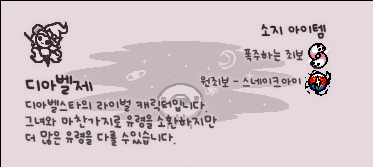
<style>
.page{position:relative;width:373px;height:167px;background:#e5d9de}
.page>*{position:absolute;margin:0}
.t1{font:12px "UhBeeSe_hyunBold";color:#372b2d}
.t2{font:12px "UhBeeSe_hyunBold";letter-spacing:-0.1em;color:#372b2d}
.t3{font:10px "UhBeeSe_hyunBold";color:#4c4442}
.t4{font:11px/16px "UhBeeSe_hyunBold";color:#4c4442}
.t5{font:16px/23px "UhBeeSe_hyunBold";color:#372b2d}
.t6{font:16px/23px "UhBeeSe_hyunBold";letter-spacing:-0.125em;color:#372b2d}
.t7{font:16px/23px "UhBeeSe_hyunBold";letter-spacing:-0.05em;color:#372b2d}
.t8{font:16px/23px "UhBeeSe_hyunBold";letter-spacing:-0.1em;color:#372b2d}
.t9{font:11px/16px "UhBeeSe_hyunBold";letter-spacing:-0.05em;color:#4c4442}
</style>
<div class="page">
<p class="t1" style="left:261px;top:24px;width:65px;height:15px"><span class="t2">소</span>지 아이템</p>
<p class="t3" style="left:244px;top:48px;width:59px;height:14px">폭주하는 죄보</p>
<p class="t4" style="left:25px;top:74px;width:192px;height:73px"><span class="t5">디</span><span class="t6">아</span><span class="t7">벨</span><span class="t8">제<br></span>디아벨스타의 라이벌 캐릭터입니다.<br>그녀와 마찬가지로 유령을 <span class="t9">소환하</span>지만<br>더 많은 유령을 다룰 수있습니다.</p>
<p class="t3" style="left:200px;top:76px;width:101px;height:12px">원죄보 - 스네이크아이</p>
</div>
